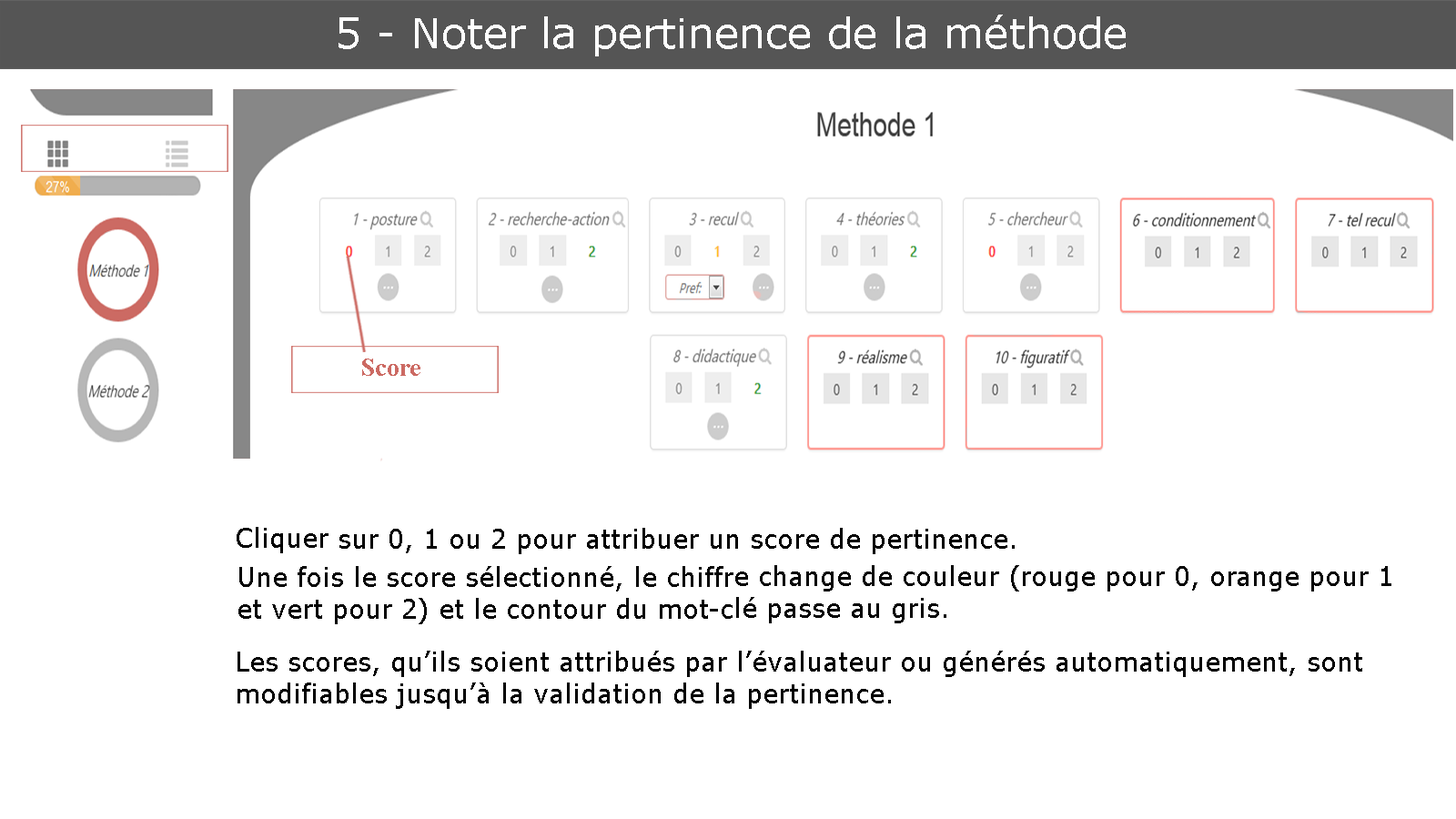
<style>
.page{position:relative;width:1456px;height:819px;background:#ffffff}
.page>*{position:absolute;margin:0}
.t1{font:41.7px "Verdana";color:#ffffff}
.t2{font:26.5px "TimesNewRomanPS-BoldMT";color:#cc6a63}
.t3{font:26.5px "Verdana";color:#000000}
.t4{font:26.5px "Verdana";color:#050505}
</style>
<div class="page">
<p class="t1" style="left:339px;top:15px;width:787px;height:41px">5 - Noter la pertinence de la méthode</p>
<p class="t2" style="left:362px;top:359px;width:58px;height:17px">Score</p>
<p class="t3" style="left:237px;top:527px;width:778px;height:27px">Cliquer sur 0, 1 ou 2 pour attribuer un score de pertinence.</p>
<p class="t4" style="left:238px;top:565px;width:1153px;height:59px">Une fois le score sélectionné, le chiffre change de couleur (rouge pour 0, orange pour 1 et vert pour 2) et le contour du mot-clé passe au gris.</p>
<p class="t3" style="left:238px;top:651px;width:1124px;height:58px">Les scores, qu’ils soient attribués par l’évaluateur ou générés automatiquement, sont modifiables jusqu’à la validation de la pertinence.</p>
</div>
